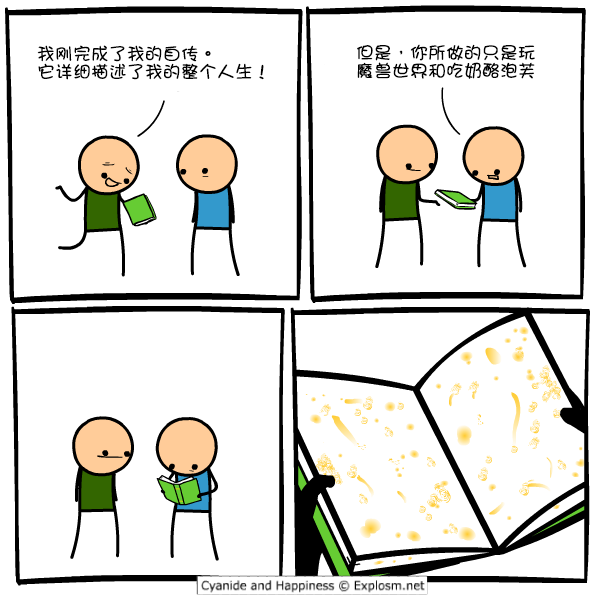
<style>
.page{position:relative;width:600px;height:600px;background:#ffffff}
.page>*{position:absolute;margin:0}
.t1{font:18px/18px "DFGirl";color:#000000}
</style>
<div class="page">
<p class="t1" style="left:37px;top:45px;width:227px;height:35px">我刚完成了我的自传。<br>它详细描述了我的整个人生！</p>
<p class="t1" style="left:357px;top:44px;width:178px;height:35px">但是，你所做的只是玩<br>魔兽世界和吃奶酪泡芙</p>
</div>
